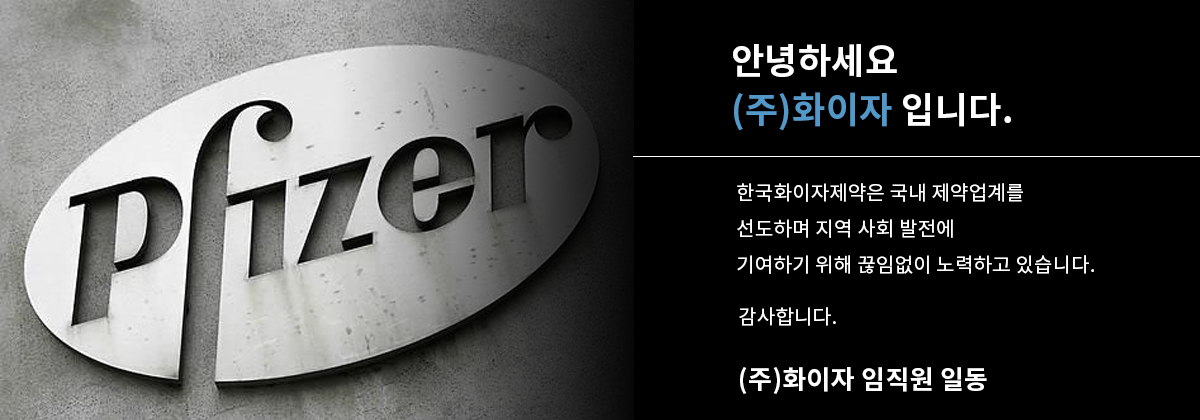
<style>
.page{position:relative;width:1200px;height:420px;background:#000000}
.page>*{position:absolute;margin:0}
.t1{font:36px "NotoSansCJKkr-Bold";letter-spacing:0.01em;color:#ffffff}
.t2{font:36px "NotoSansCJKkr-Bold";letter-spacing:0.01em;color:#5498c8}
.t3{font:20px/36px "NotoSansCJKkr-Regular";letter-spacing:0.01em;color:#ffffff}
.t4{font:20px "NotoSansCJKkr-Regular";letter-spacing:0.01em;color:#ffffff}
.t5{font:26px "NotoSansCJKkr-Bold";letter-spacing:0.01em;color:#ffffff}
</style>
<div class="page">
<p class="t1" style="left:733px;top:44px;width:164px;height:33px">안녕하세요</p>
<p class="t2" style="left:734px;top:92px;width:277px;height:39px">(주)화이자 <span class="t1">입니다.</span></p>
<p class="t3" style="left:737px;top:183px;width:357px;height:91px">한국화이자제약은 국내 제약업계를 <br>선도하며 지역 사회 발전에 <br>기여하기 위해 끊임없이 노력하고 있습니다.</p>
<p class="t4" style="left:739px;top:307px;width:97px;height:19px">감사합니다.</p>
<p class="t5" style="left:740px;top:367px;width:247px;height:27px">(주)화이자 임직원 일동</p>
</div>
